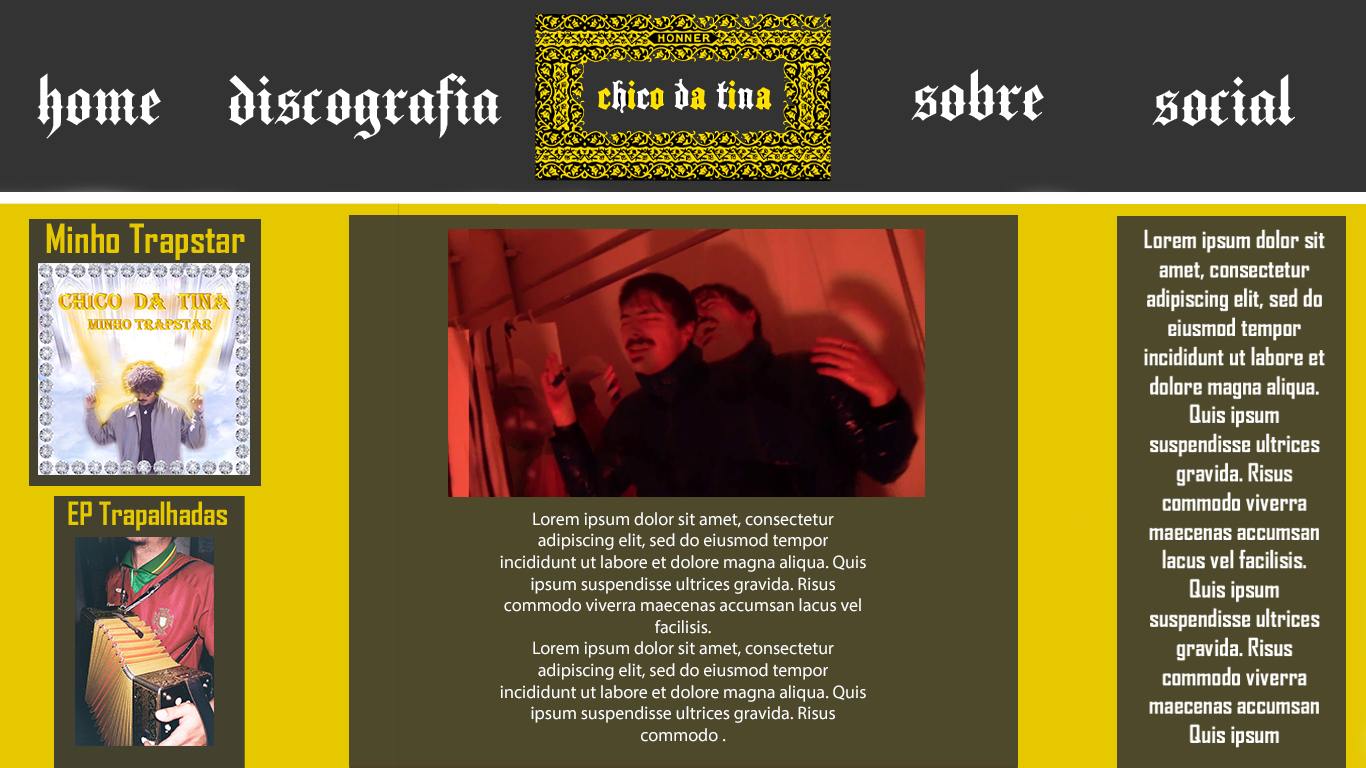
<style>
.page{position:relative;width:1366px;height:768px;background:#4e492b}
.page>*{position:absolute;margin:0}
.t1{font:71.6px "MediciText";color:#ffffff}
.t2{font:38.7px "AgencyFB-Bold";color:#e5c800}
.t3{font:24.2px "AgencyFB-Bold";color:#ffffff}
.t4{font:30.8px "AgencyFB-Bold";color:#e5c800}
.t5{font:18px "MyriadPro-Regular";color:#ffffff}
</style>
<div class="page">
<p class="t1" style="left:37px;top:73px;width:124px;height:66px">home</p>
<p class="t1" style="left:228px;top:73px;width:274px;height:67px">discografia</p>
<p class="t1" style="left:911px;top:69px;width:133px;height:53px">sobre</p>
<p class="t1" style="left:1152px;top:74px;width:143px;height:53px">social</p>
<p class="t2" style="left:46px;top:223px;width:199px;height:37px">Minho Trapstar</p>
<p class="t3" style="left:1144px;top:229px;width:181px;height:519px;text-align:center">Lorem ipsum dolor sit amet, consectetur adipiscing elit, sed do eiusmod tempor incididunt ut labore et dolore magna aliqua. Quis ipsum suspendisse ultrices gravida. Risus commodo viverra maecenas accumsan lacus vel facilisis. <br>Quis ipsum suspendisse ultrices gravida. Risus commodo viverra maecenas accumsan<br>Quis ipsum <br><br>suspendisse ultrices gravida. Risus commodo viverra maecenas accumsan lacus vel facilisis.  lacus vel facilisis.</p>
<p class="t4" style="left:68px;top:501px;width:159px;height:30px">EP Trapalhadas</p>
<p class="t5" style="left:500px;top:512px;width:366px;height:230px;text-align:center">Lorem ipsum dolor sit amet, consectetur adipiscing elit, sed do eiusmod tempor incididunt ut labore et dolore magna aliqua. Quis ipsum suspendisse ultrices gravida. Risus commodo viverra maecenas accumsan lacus vel facilisis. <br>Lorem ipsum dolor sit amet, consectetur adipiscing elit, sed do eiusmod tempor incididunt ut labore et dolore magna aliqua. Quis ipsum suspendisse ultrices gravida. Risus commodo .</p>
</div>
